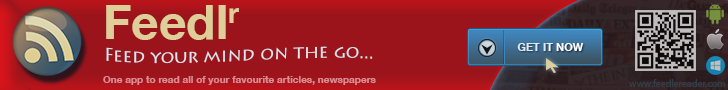
<style>
.page{position:relative;width:728px;height:90px;background:#9b141b}
.page>*{position:absolute;margin:0}
.t1{font:48px "HelveticaNeue-Bold";color:#dfce9a}
.t2{font:18px "LithosPro-Regular";color:#dde4eb}
.t3{font:11px "HelveticaNeue-Bold"}
.t4{font:10px "HelveticaNeue-Bold";color:#dc8c93}
.t5{font:10px "MyriadPro-Regular";color:#323d45}
</style>
<div class="page">
<p class="t1" style="left:106px;top:5px;width:133px;height:35px">Feedlr</p>
<p class="t2" style="left:106px;top:46px;width:267px;height:18px">Feed your mind on the go...</p>
<p class="t3" style="left:517px;top:43px;width:67px;height:8px">GET IT NOW</p>
<p class="t4" style="left:103px;top:76px;width:273px;height:9px">One app to read all of your favourite articles, newspapers</p>
<p class="t5" style="left:629px;top:79px;width:96px;height:8px">www.feedlereader.com</p>
</div>
